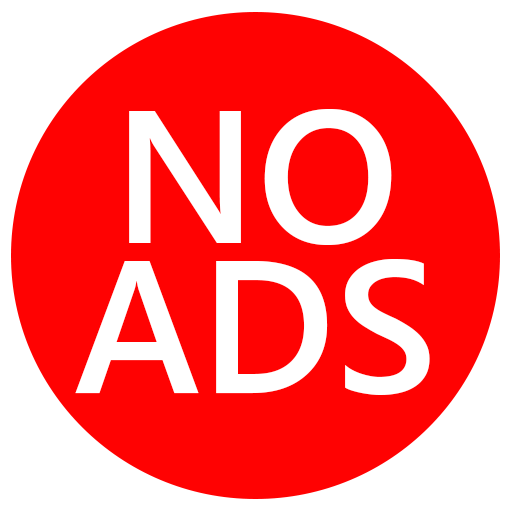
<style>
.page{position:relative;width:512px;height:512px;background:#ff0202}
.page>*{position:absolute;margin:0}
.t1{font:187.5px "SegoeUI-Semibold";color:#ffffff}
</style>
<div class="page">
<p class="t1" style="left:75px;top:109px;width:355px;height:286px;text-align:center">NO<br>ADS</p>
</div>
